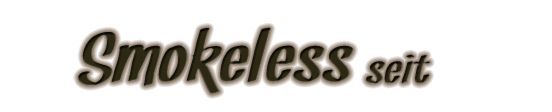
<style>
.page{position:relative;width:552px;height:112px;background:#ffffff}
.page>*{position:absolute;margin:0}
.t1{font:72px "Snickles";letter-spacing:0.025em;color:#2c2813;scale:1.2 1}
.t2{font:44px "Snickles";letter-spacing:0.025em;color:#2c2813;scale:1.2 1}
</style>
<div class="page">
<p class="t1" style="left:78px;top:27px;width:352px;height:67px">Smokeless<span class="t2"> seit</span></p>
</div>
